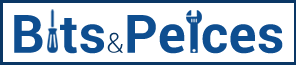
<style>
.page{position:relative;width:296px;height:65px;background:#ffffff}
.page>*{position:absolute;margin:0}
.t1{font:53px "Roboto-Bold";letter-spacing:0.01em;color:#0e4e90}
.t2{font:28px "Roboto-Light";letter-spacing:0.01em;color:#0a3765}
</style>
<div class="page">
<p class="t1" style="left:14px;top:12px;width:269px;height:42px">Bits<span class="t2">&amp;</span>Peices</p>
</div>
